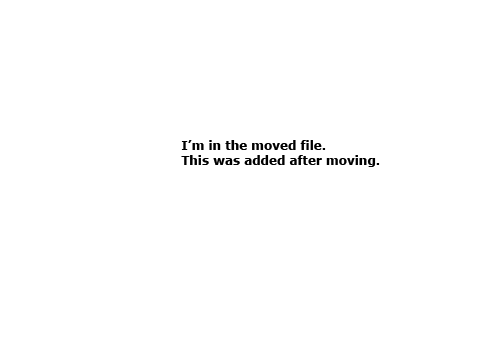
<style>
.page{position:relative;width:504px;height:360px;background:#ffffff}
.page>*{position:absolute;margin:0}
.t1{font:12px "Verdana-Bold";color:#000000}
</style>
<div class="page">
<p class="t1" style="left:181px;top:140px;width:199px;height:27px">I’m in the moved file.<br>This was added after moving.</p>
</div>
